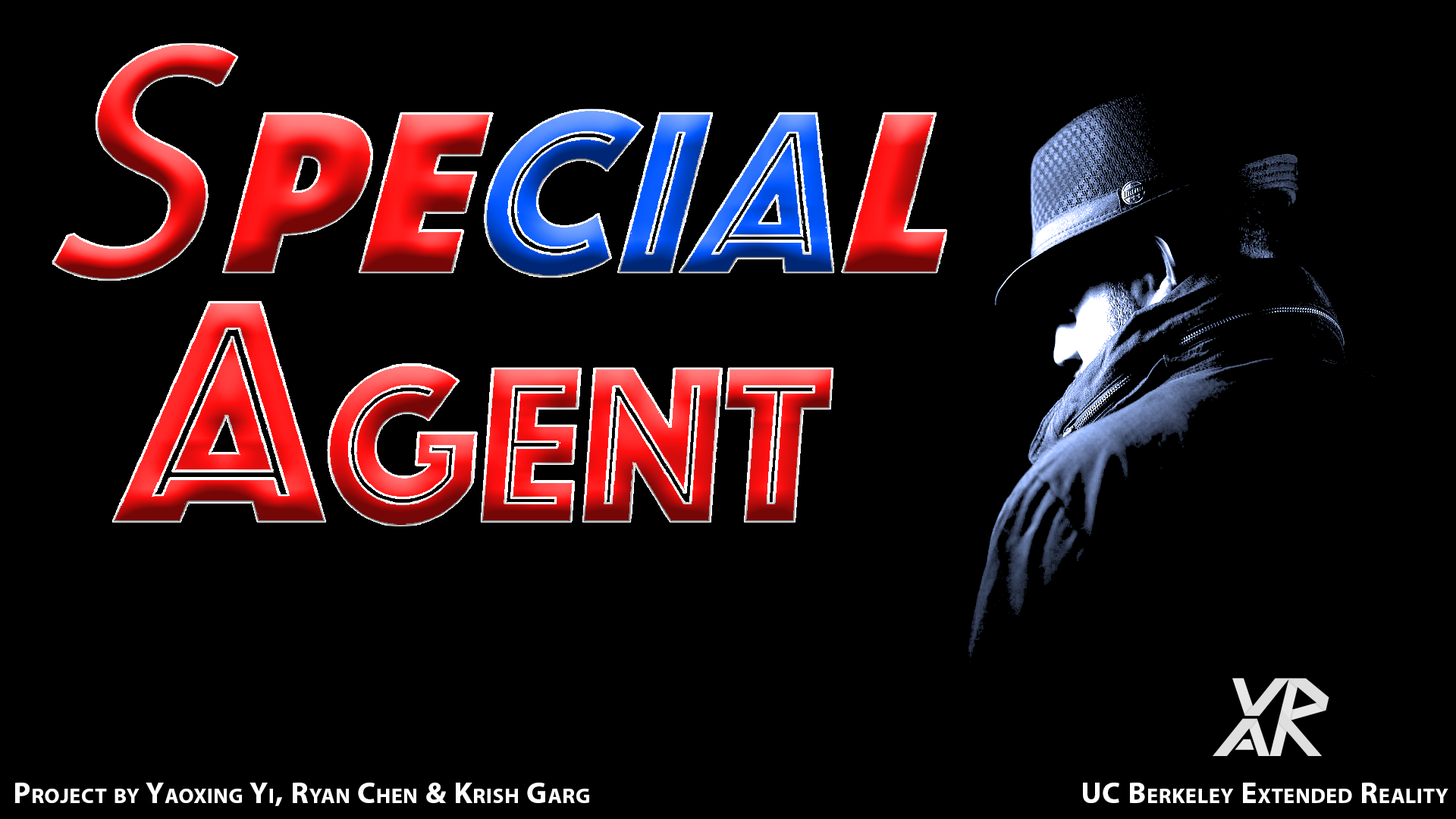
<style>
.page{position:relative;width:1456px;height:819px;background:#000000}
.page>*{position:absolute;margin:0}
.t1{font:30.3px "MyriadPro-Bold";letter-spacing:0.025em;color:#ffffff;font-variant:small-caps}
</style>
<div class="page">
<p class="t1" style="left:15px;top:783px;width:574px;height:23px">Project by Yaoxing Yi, Ryan Chen &amp; Krish Garg</p>
<p class="t1" style="left:1083px;top:783px;width:365px;height:20px">UC Berkeley Extended Reality</p>
</div>
